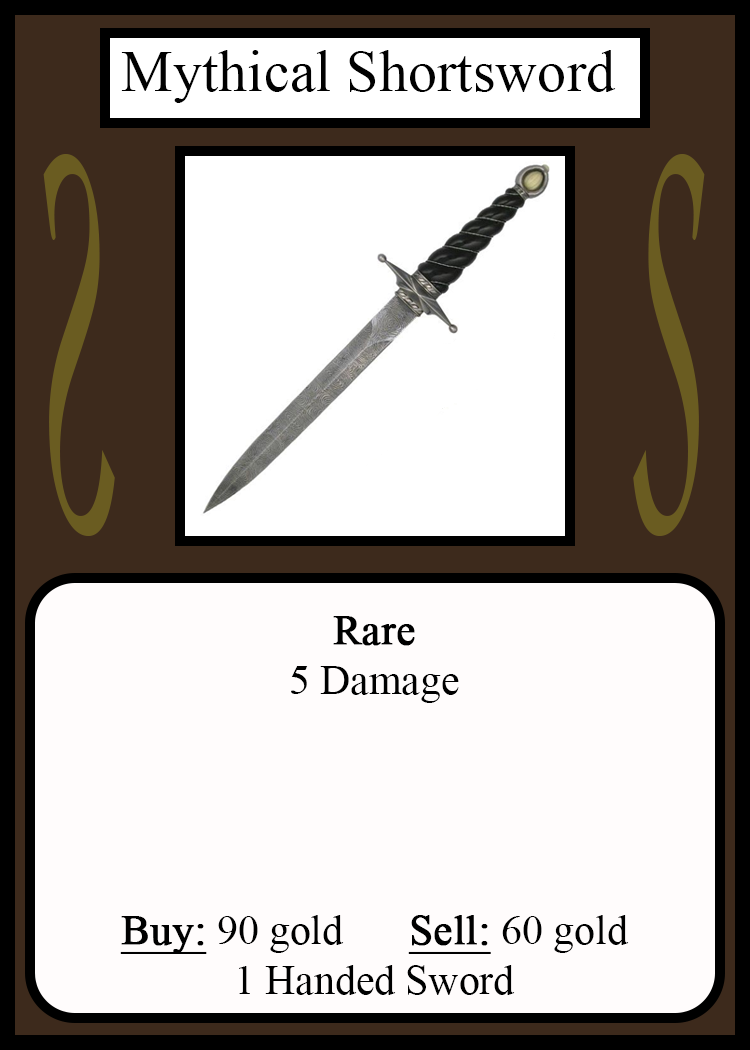
<style>
.page{position:relative;width:750px;height:1050px;background:#fffcfc}
.page>*{position:absolute;margin:0}
.t1{font:58.3px "TimesNewRomanPSMT";color:#010101}
.t2{font:548.5px "Apple-Chancery";color:#6a5c21;scale:0.27 1}
.t3{font:548.2px "Apple-Chancery";color:#6a5c21;scale:0.27 1}
.t4{font:41.7px "TimesNewRomanPSMT";color:#000000}
.t5{font:41.7px "TimesNewRomanPSMT";color:#000000;font-weight:bold}
.t6{font:41.7px "TimesNewRomanPSMT";color:#000000;font-weight:bold;text-decoration:underline}
</style>
<div class="page">
<p class="t1" style="left:121px;top:50px;width:495px;height:53px">Mythical Shortsword</p>
<p class="t2" style="left:43px;top:154px;width:72px;height:382px;rotate:180deg">S</p>
<p class="t3" style="left:633px;top:154px;width:72px;height:382px">S</p>
<p class="t4" style="left:120px;top:616px;width:509px;height:379px;text-align:center"><span class="t5">Rare<br></span>5 Damage<br><br><br><br><br><span class="t6">Buy:</span> 90 gold   <span class="t6">Sell:</span> 60 gold<br>1 Handed Sword</p>
</div>
